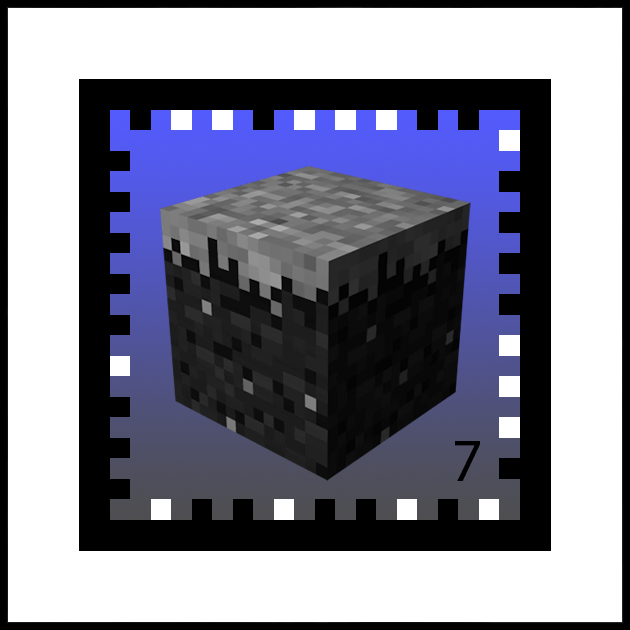
<style>
.page{position:relative;width:630px;height:630px;background:#ffffff}
.page>*{position:absolute;margin:0}
.t1{font:61.1px "MyriadPro-Regular";color:#000000;font-variant:small-caps}
</style>
<div class="page">
<p class="t1" style="left:455px;top:441px;width:25px;height:40px">7</p>
</div>
